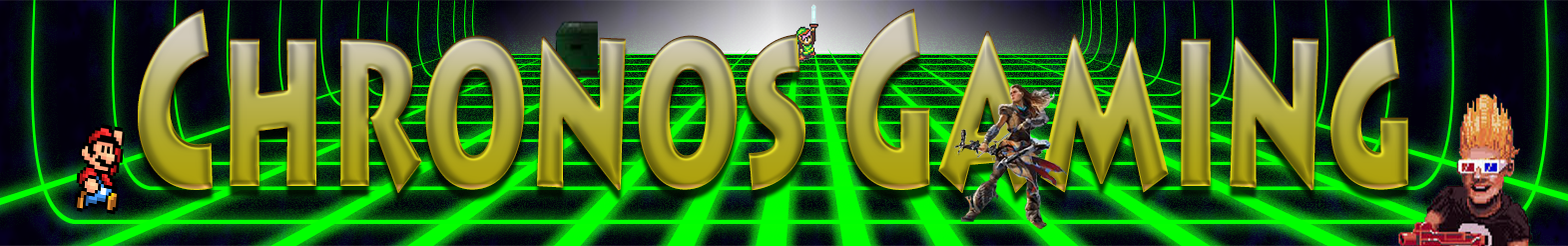
<style>
.page{position:relative;width:1568px;height:246px}
.page>*{position:absolute;margin:0}
.t1{font:243.1px "LithosPro-Black";scale:0.54 1}
</style>
<div class="page">
<p class="t1" style="left:138px;top:8px;width:1270px;height:185px">Chronos Gaming</p>
</div>
